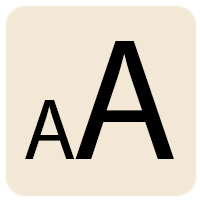
<style>
.page{position:relative;width:200px;height:200px;background:#f2e8d5}
.page>*{position:absolute;margin:0}
.t1{font:174.6px "MyriadPro-Regular";color:#000000}
.t2{font:87.3px "MyriadPro-Regular";color:#000000}
</style>
<div class="page">
<p class="t1" style="left:75px;top:41px;width:99px;height:118px">A</p>
<p class="t2" style="left:25px;top:100px;width:50px;height:59px">A</p>
</div>
